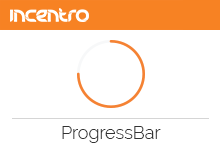
<style>
.page{position:relative;width:220px;height:150px;background:#ffffff}
.page>*{position:absolute;margin:0}
.t1{font:18px "Raleway-Light";color:#333333}
</style>
<div class="page">
<p class="t1" style="left:62px;top:126px;width:99px;height:17px">ProgressBar</p>
</div>
